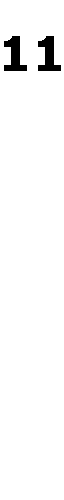
<style>
.page{position:relative;width:64px;height:500px;background:#ffffff}
.page>*{position:absolute;margin:0}
.t1{font:48px "Verdana-Bold";color:#000000}
</style>
<div class="page">
<p class="t1" style="left:4px;top:36px;width:57px;height:35px">11</p>
</div>
